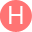
<style>
.page{position:relative;width:32px;height:32px;background:#ff7474}
.page>*{position:absolute;margin:0}
.t1{font:25px "MicrosoftTaiLe";color:#ffffff}
</style>
<div class="page">
<p class="t1" style="left:9px;top:6px;width:14px;height:18px">H</p>
</div>
